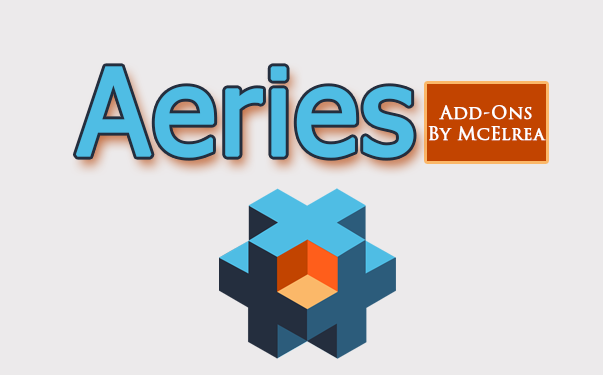
<style>
.page{position:relative;width:603px;height:375px;background:#eceaeb}
.page>*{position:absolute;margin:0}
.t1{font:119px "Tahoma";color:#4fbde4;font-weight:bold}
.t2{font:18px "TrajanPro3-Regular";color:#ffffff;font-weight:bold}
</style>
<div class="page">
<p class="t1" style="left:75px;top:66px;width:339px;height:92px">Aeries</p>
<p class="t2" style="left:428px;top:105px;width:118px;height:36px;text-align:center">Add-Ons<br>By McElrea</p>
</div>
